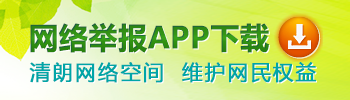
<style>
.page{position:relative;width:350px;height:100px}
.page>*{position:absolute;margin:0}
.t1{font:29.8px "MicrosoftYaHei-Bold";color:#2f8a15;font-weight:bold}
.t2{font:20.9px "MicrosoftYaHei";letter-spacing:0.1em;color:#00a5a7;font-weight:bold}
</style>
<div class="page">
<p class="t1" style="left:30px;top:23px;width:239px;height:30px">网络举报APP下载</p>
<p class="t2" style="left:29px;top:62px;width:134px;height:21px">清朗网络空间</p>
<p class="t2" style="left:182px;top:62px;width:134px;height:21px">维护网民权益</p>
</div>
